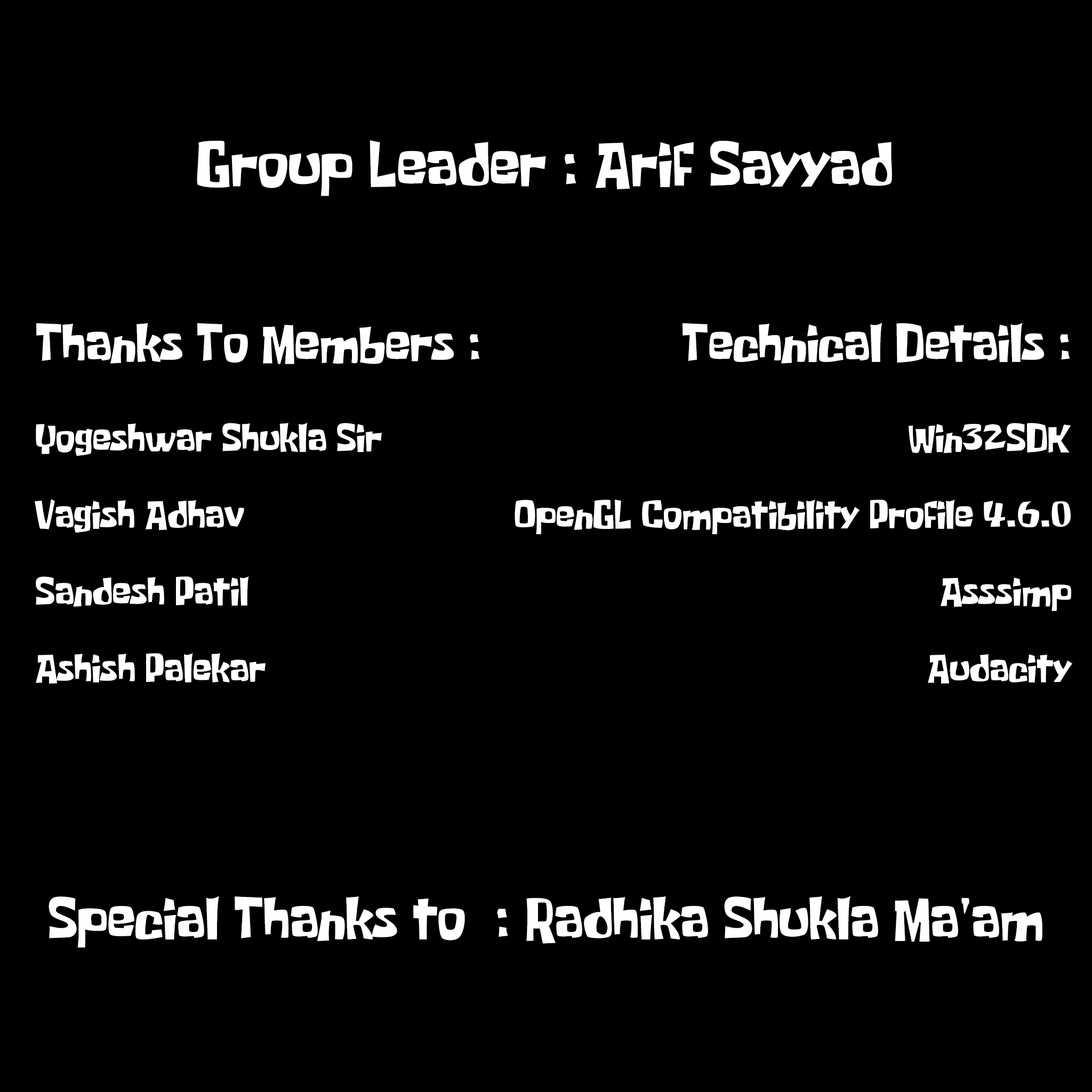
<style>
.page{position:relative;width:1092px;height:1092px;background:#000000}
.page>*{position:absolute;margin:0}
.t1{font:51.5px "SpongeboyMeBob";color:#ffffff}
.t2{font:32px "SpongeboyMeBob";color:#ffffff}
.t3{font:42.9px "SpongeboyMeBob";color:#ffffff}
.t4{font:47.6px "SpongeboyMeBob";color:#ffffff}
</style>
<div class="page">
<p class="t1" style="left:197px;top:140px;width:695px;height:56px">Group Leader : Arif Sayyad</p>
<p class="t2" style="left:35px;top:323px;width:445px;height:361px"><span class="t3">Thanks To Members : <br><br></span>Yogeshwar Shukla Sir<br><br>Vagish Adhav<br><br>Sandesh Patil<br><br>Ashish Palekar</p>
<p class="t2" style="left:515px;top:323px;width:557px;height:361px;text-align:right"><span class="t3">Technical Details : <br><br></span>Win32SDK<br><br>OpenGL Compatibility Profile 4.6.0<br><br>Asssimp<br><br>Audacity</p>
<p class="t4" style="left:49px;top:896px;width:993px;height:51px">Special Thanks to  : Radhika Shukla Ma'am</p>
</div>
